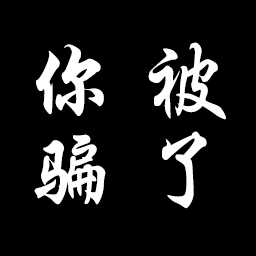
<style>
.page{position:relative;width:256px;height:256px;background:#000000}
.page>*{position:absolute;margin:0}
.t1{font:92px/88px "STXingkai";letter-spacing:0.24em;color:#ffffff}
</style>
<div class="page">
<p class="t1" style="left:34px;top:42px;width:192px;height:167px;text-align:center">你被骗了</p>
</div>
